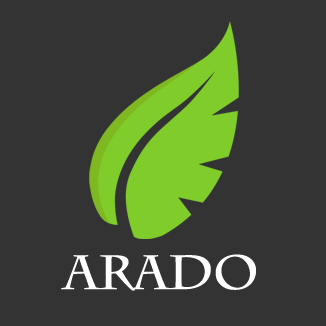
<style>
.page{position:relative;width:326px;height:326px;background:#333333}
.page>*{position:absolute;margin:0}
.t1{font:48px "CharlemagneStd-Bold";color:#ffffff}
</style>
<div class="page">
<p class="t1" style="left:61px;top:254px;width:195px;height:37px">Arado</p>
</div>
